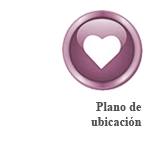
<style>
.page{position:relative;width:150px;height:150px;background:#ffffff}
.page>*{position:absolute;margin:0}
.t1{font:12.5px "TimesNewRomanPS-BoldMT";color:#505050}
</style>
<div class="page">
<p class="t1" style="left:91px;top:102px;width:51px;height:24px;text-align:right">Plano de<br>ubicación</p>
</div>
